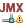
<style>
.page{position:relative;width:24px;height:24px;background:#ffffff}
.page>*{position:absolute;margin:0}
.t1{font:12px "MyriadPro-Semibold";color:#934543;font-weight:bold}
</style>
<div class="page">
<p class="t1" style="left:0px;top:3px;width:24px;height:10px">JMX</p>
</div>
